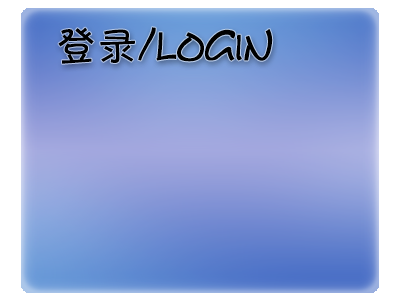
<style>
.page{position:relative;width:400px;height:300px}
.page>*{position:absolute;margin:0}
.t1{font:41.7px "Jkaton";color:#000000}
</style>
<div class="page">
<p class="t1" style="left:58px;top:27px;width:215px;height:37px">登录/LOGIN</p>
</div>
